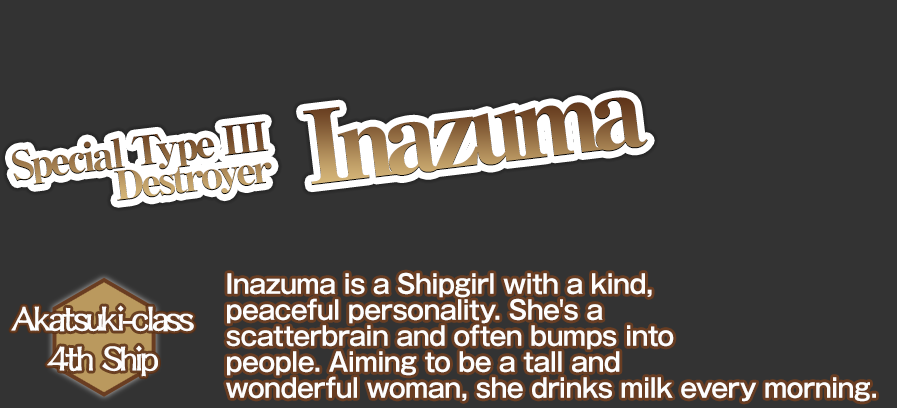
<style>
.page{position:relative;width:897px;height:408px;background:#333333}
.page>*{position:absolute;margin:0}
.t1{font:100px "RyuminPro-ExHeavy";letter-spacing:-0.1em}
.t2{font:40px/32px "RyuminPro-ExHeavy";letter-spacing:-0.08em}
.t3{font:26px/26px "GothicMB101Pro-DeBold";letter-spacing:-0.02em;color:#fdfdfd;scale:0.95 1}
.t4{font:40px/40px "DFLungMen-W9-WINP-BF";letter-spacing:-0.09em;color:#fdfdfd}
</style>
<div class="page">
<p class="t1" style="left:303px;top:97px;width:345px;height:89px;rotate:-7deg">Inazuma</p>
<p class="t2" style="left:12px;top:121px;width:260px;height:80px;text-align:right;rotate:-7deg">Special Type III<br>Destroyer</p>
<p class="t3" style="left:226px;top:272px;width:650px;height:130px">Inazuma is a Shipgirl with a kind,<br>peaceful personality. She's a<br>scatterbrain and often bumps into<br>people. Aiming to be a tall and<br>wonderful woman, she drinks milk every morning.</p>
<p class="t4" style="left:11px;top:305px;width:183px;height:72px;text-align:center">Akatsuki-class<br>4th Ship</p>
</div>
